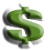
<style>
.page{position:relative;width:50px;height:50px;background:#ffffff}
.page>*{position:absolute;margin:0}
.t1{font:40px "Impact";text-transform:uppercase;scale:1.87 1}
</style>
<div class="page">
<p class="t1" style="left:7px;top:6px;width:37px;height:39px">$</p>
</div>
